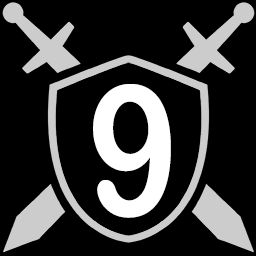
<style>
.page{position:relative;width:256px;height:256px;background:#000000}
.page>*{position:absolute;margin:0}
.t1{font:182.4px "ArialRoundedMTBold";letter-spacing:-0.4em;color:#ffffff;font-variant:small-caps;scale:0.83 1}
</style>
<div class="page">
<p class="t1" style="left:93px;top:84px;width:78px;height:134px">9</p>
</div>
